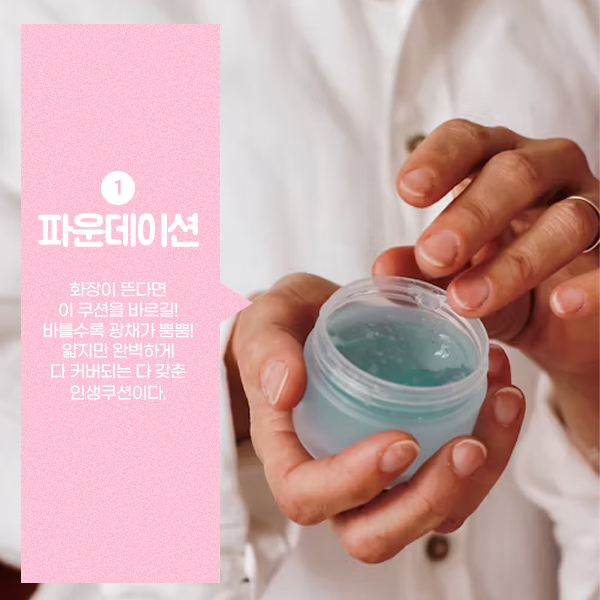
<style>
.page{position:relative;width:600px;height:600px}
.page>*{position:absolute;margin:0}
.t1{font:20px "BMJUA";letter-spacing:-0.05em;color:#f9bcd1}
.t2{font:42px "BMJUA";letter-spacing:-0.05em;color:#ffffff}
.t3{font:17px "GmarketSansMedium";letter-spacing:-0.05em;color:#ffffff}
</style>
<div class="page">
<p class="t1" style="left:115px;top:180px;width:6px;height:15px">1</p>
<p class="t2" style="left:38px;top:213px;width:162px;height:35px">파운데이션</p>
<p class="t3" style="left:43px;top:281px;width:150px;height:119px;text-align:center">화장이 뜬다면 <br>이 쿠션을 바르길! <br>바를수록 광채가 뿜뿜! <br>얇지만 완벽하게 <br>다 커버되는 다 갖춘 인생쿠션이다.</p>
</div>
